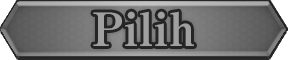
<style>
.page{position:relative;width:289px;height:60px}
.page>*{position:absolute;margin:0}
.t1{font:46px "RyuminPro-ExBold";color:#a0a0a0}
</style>
<div class="page">
<p class="t1" style="left:93px;top:11px;width:101px;height:35px">Pilih</p>
</div>
